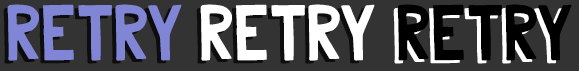
<style>
.page{position:relative;width:579px;height:71px;background:#333333}
.page>*{position:absolute;margin:0}
.t1{font:74.4px "BluberryRegular-Normal";letter-spacing:0.02em;color:#8185d5;scale:0.85 1}
.t2{font:74.4px "BluberryRegular-Normal";letter-spacing:0.02em;color:#ffffff;scale:0.85 1}
.t3{font:74.4px "BluberryRegular-Normal";letter-spacing:0.02em;color:#000000;scale:0.85 1}
</style>
<div class="page">
<p class="t1" style="left:7px;top:4px;width:175px;height:57px">RETRY</p>
<p class="t2" style="left:200px;top:4px;width:175px;height:57px">RETRY</p>
<p class="t3" style="left:397px;top:4px;width:175px;height:57px">RETRY</p>
</div>
